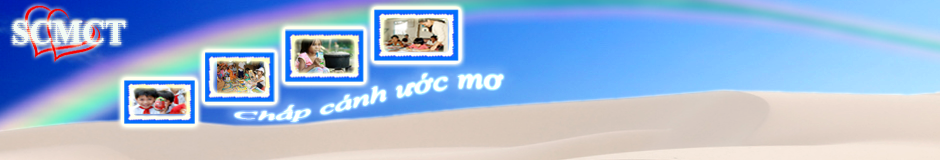
<style>
.page{position:relative;width:940px;height:160px}
.page>*{position:absolute;margin:0}
.t1{font:33px "TimesNewRomanPS-BoldMT";color:#f1fbf3;scale:0.96 1}
.t2{font:20.9px "TimesNewRomanPS-ItalicMT";color:#ffffff;scale:1.7 1}
</style>
<div class="page">
<p class="t1" style="left:13px;top:21px;width:112px;height:23px">SCMCT</p>
<p class="t2" style="left:234px;top:73px;width:269px;height:49px;rotate:-7deg">Chấp cánh ước mơ</p>
</div>
